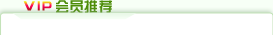
<style>
.page{position:relative;width:273px;height:35px;background:#ffffff}
.page>*{position:absolute;margin:0}
.t1{font:14px "HYk1gj";letter-spacing:0.04em}
.t2{font:14px "HYk1gj";letter-spacing:0.04em;color:#4c8c07}
</style>
<div class="page">
<p class="t1" style="left:23px;top:1px;width:29px;height:10px">VIP</p>
<p class="t2" style="left:56px;top:0px;width:56px;height:13px">会员推荐</p>
</div>
